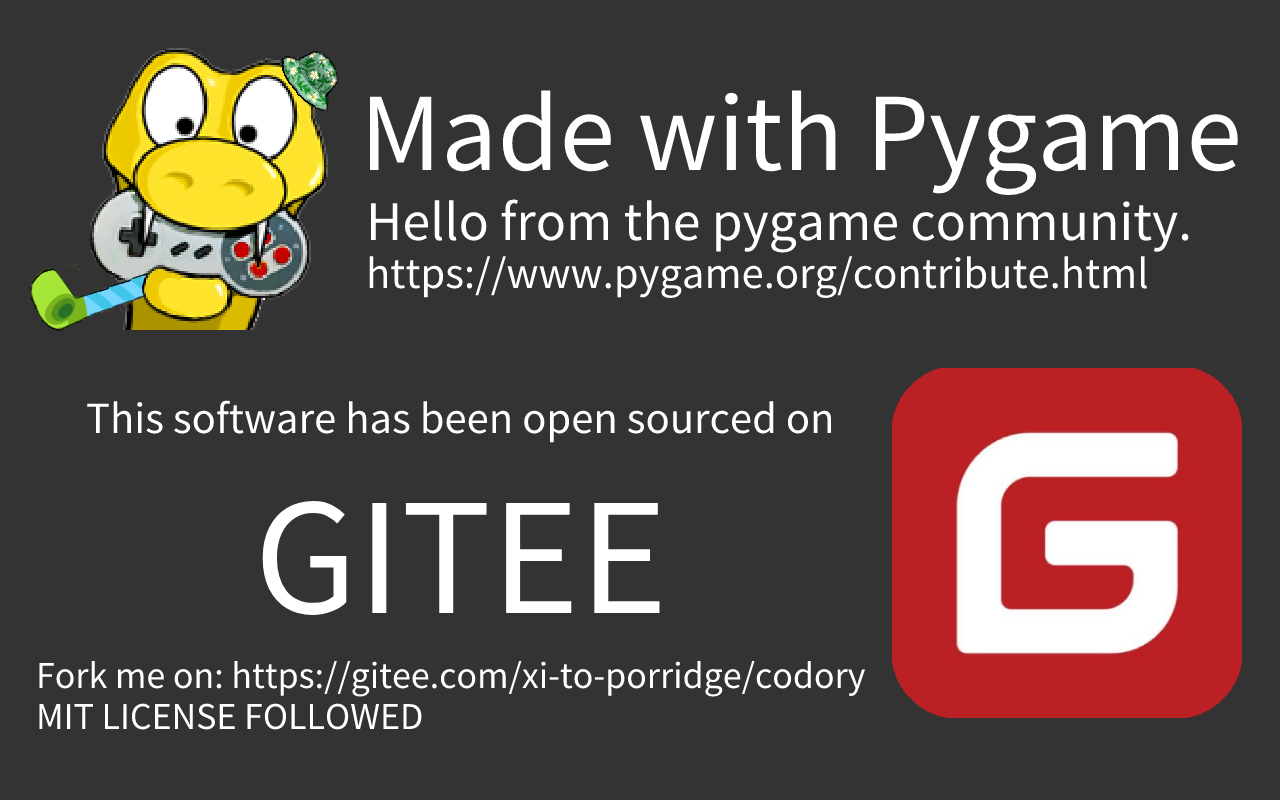
<style>
.page{position:relative;width:1280px;height:800px;background:#333333}
.page>*{position:absolute;margin:0}
.t1{font:100px "SourceHanSansSC-Regular";color:#ffffff}
.t2{font:40px "SourceHanSansSC-Regular";color:#ffffff}
.t3{font:50px "SourceHanSansSC-Regular";color:#ffffff}
.t4{font:150px "SourceHanSansSC-Regular";color:#ffffff}
.t5{font:34px "SourceHanSansSC-Regular";color:#ffffff}
</style>
<div class="page">
<p class="t1" style="left:370px;top:90px;width:868px;height:105px">Made with Pygame</p>
<p class="t2" style="left:369px;top:199px;width:820px;height:99px"><span class="t3">Hello from the pygame community.<br></span>https://www.pygame.org/contribute.html</p>
<p class="t2" style="left:87px;top:400px;width:745px;height:215px">This software has been open sourced on<br>     <span class="t4">GITEE</span></p>
<p class="t5" style="left:39px;top:660px;width:827px;height:70px">Fork me on: https://gitee.com/xi-to-porridge/codory<br>MIT LICENSE FOLLOWED</p>
</div>
